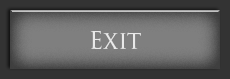
<style>
.page{position:relative;width:230px;height:79px;background:#333333}
.page>*{position:absolute;margin:0}
.t1{font:24px "TrajanPro3-Regular";color:#e9e9e9}
</style>
<div class="page">
<p class="t1" style="left:90px;top:31px;width:51px;height:18px">Exit</p>
</div>
